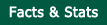
<style>
.page{position:relative;width:107px;height:25px;background:#005941}
.page>*{position:absolute;margin:0}
.t1{font:14px "Tahoma";letter-spacing:0.02em;color:#ffffff;font-weight:bold}
</style>
<div class="page">
<p class="t1" style="left:9px;top:6px;width:89px;height:12px">Facts &amp; Stats</p>
</div>
